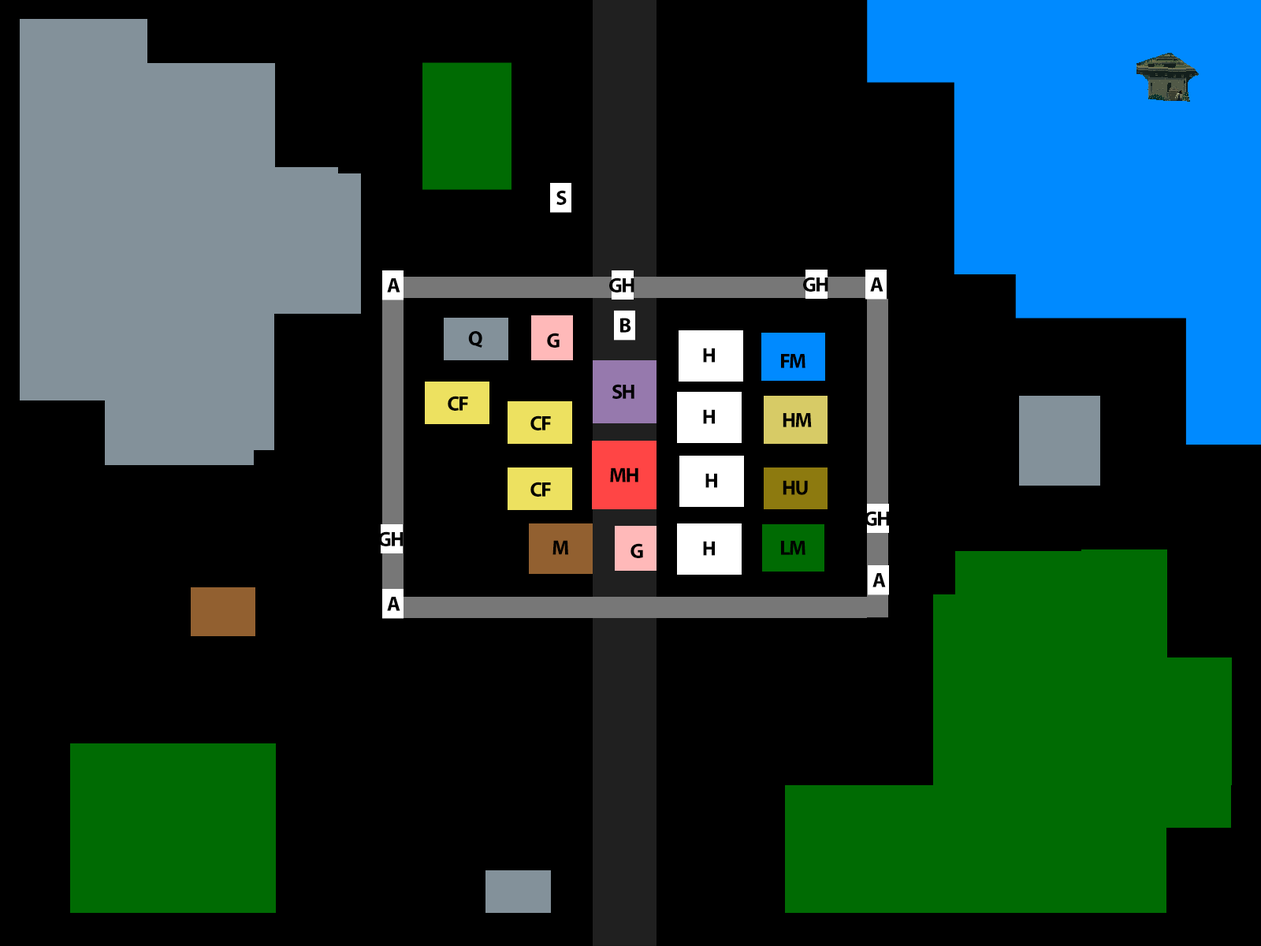
<style>
.page{position:relative;width:1261px;height:946px;background:#000000}
.page>*{position:absolute;margin:0}
.t1{font:20.7px "MyriadPro-Bold";letter-spacing:-0.06em;color:#000000}
</style>
<div class="page">
<p class="t1" style="left:556px;top:190px;width:11px;height:15px">S</p>
<p class="t1" style="left:387px;top:278px;width:13px;height:14px">A</p>
<p class="t1" style="left:609px;top:277px;width:25px;height:15px">GH</p>
<p class="t1" style="left:803px;top:277px;width:25px;height:15px">GH</p>
<p class="t1" style="left:870px;top:277px;width:13px;height:15px">A</p>
<p class="t1" style="left:620px;top:318px;width:11px;height:15px">B</p>
<p class="t1" style="left:468px;top:331px;width:14px;height:17px">Q</p>
<p class="t1" style="left:547px;top:333px;width:13px;height:15px">G</p>
<p class="t1" style="left:703px;top:348px;width:12px;height:15px">H</p>
<p class="t1" style="left:781px;top:354px;width:24px;height:14px">FM</p>
<p class="t1" style="left:612px;top:384px;width:22px;height:15px">SH</p>
<p class="t1" style="left:448px;top:396px;width:20px;height:15px">CF</p>
<p class="t1" style="left:703px;top:409px;width:12px;height:15px">H</p>
<p class="t1" style="left:783px;top:413px;width:29px;height:14px">HM</p>
<p class="t1" style="left:530px;top:415px;width:21px;height:15px">CF</p>
<p class="t1" style="left:610px;top:467px;width:28px;height:15px">MH</p>
<p class="t1" style="left:705px;top:473px;width:12px;height:15px">H</p>
<p class="t1" style="left:530px;top:482px;width:21px;height:14px">CF</p>
<p class="t1" style="left:783px;top:480px;width:25px;height:15px">HU</p>
<p class="t1" style="left:865px;top:511px;width:25px;height:15px">GH</p>
<p class="t1" style="left:378px;top:531px;width:25px;height:15px">GH</p>
<p class="t1" style="left:552px;top:540px;width:16px;height:15px">M</p>
<p class="t1" style="left:630px;top:543px;width:13px;height:15px">G</p>
<p class="t1" style="left:703px;top:541px;width:12px;height:15px">H</p>
<p class="t1" style="left:781px;top:541px;width:24px;height:14px">LM</p>
<p class="t1" style="left:872px;top:573px;width:14px;height:14px">A</p>
<p class="t1" style="left:387px;top:597px;width:13px;height:14px">A</p>
</div>
